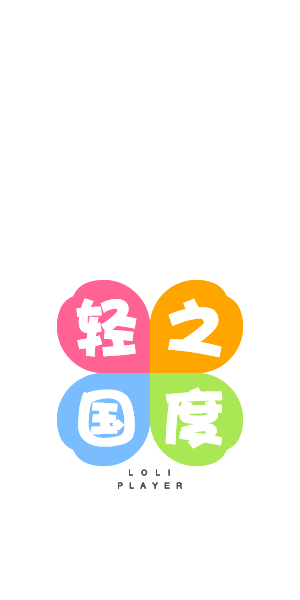
<style>
.page{position:relative;width:300px;height:600px;background:#ffffff}
.page>*{position:absolute;margin:0}
.t1{font:65px/90px "DFHaiBaoW12";letter-spacing:-0.08em;color:#ffffff}
.t2{font:8px "MicrosoftSansSerif";letter-spacing:0.35em;color:#535353;font-weight:bold}
.t3{font:8px "MicrosoftSansSerif";letter-spacing:0.8em;color:#4f4f4f;font-weight:bold}
</style>
<div class="page">
<p class="t1" style="left:76px;top:298px;width:147px;height:151px">轻 之<br>国 度</p>
<p class="t2" style="left:129px;top:469px;width:41px;height:7px">L O L I</p>
<p class="t3" style="left:118px;top:482px;width:64px;height:7px">PLAYER</p>
</div>
